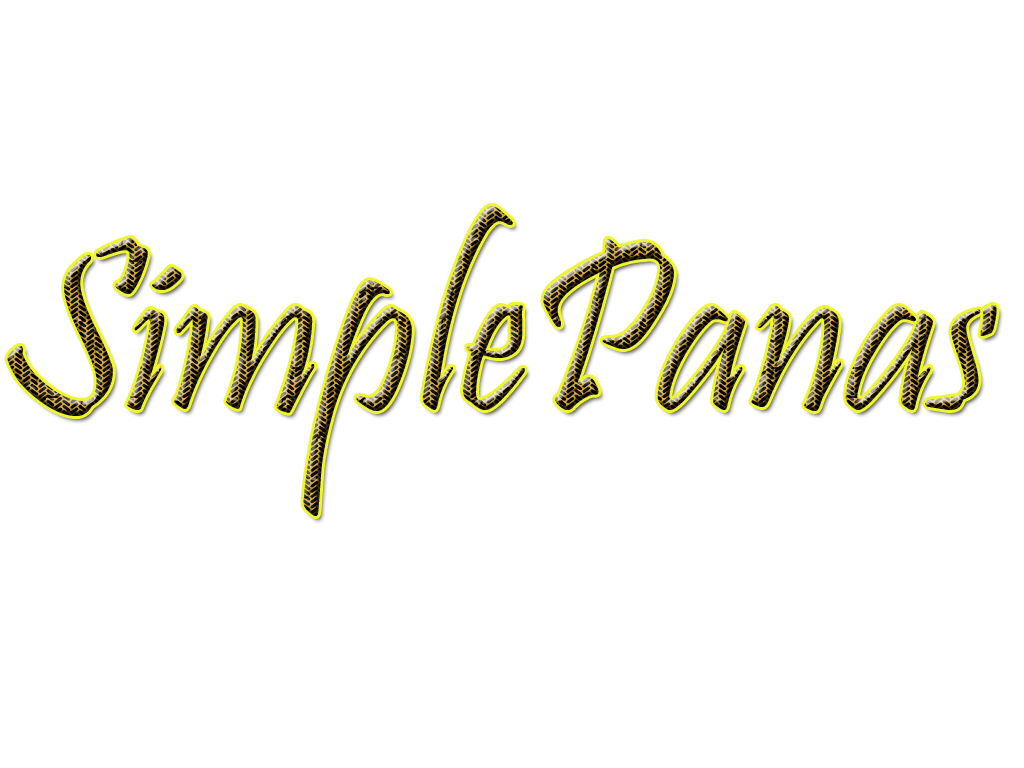
<style>
.page{position:relative;width:1024px;height:768px;background:#ffffff}
.page>*{position:absolute;margin:0}
.t1{font:247px "Pristina-Regular";scale:0.94 1}
</style>
<div class="page">
<p class="t1" style="left:7px;top:206px;width:990px;height:310px">SimplePanas</p>
</div>
